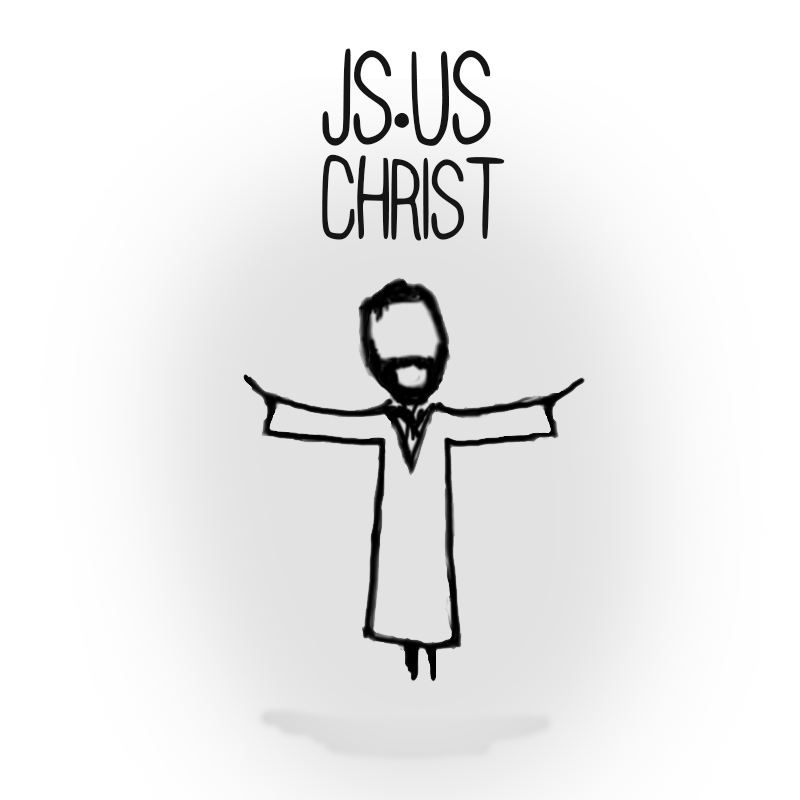
<style>
.page{position:relative;width:800px;height:800px;background:#ffffff}
.page>*{position:absolute;margin:0}
.t1{font:141.4px "SKOYArwahTuyul";color:#151515}
.t2{font:120.2px "SKOYArwahTuyul";color:#151515}
</style>
<div class="page">
<p class="t1" style="left:322px;top:48px;width:169px;height:98px">js.us</p>
<p class="t2" style="left:322px;top:154px;width:183px;height:87px">christ</p>
</div>
